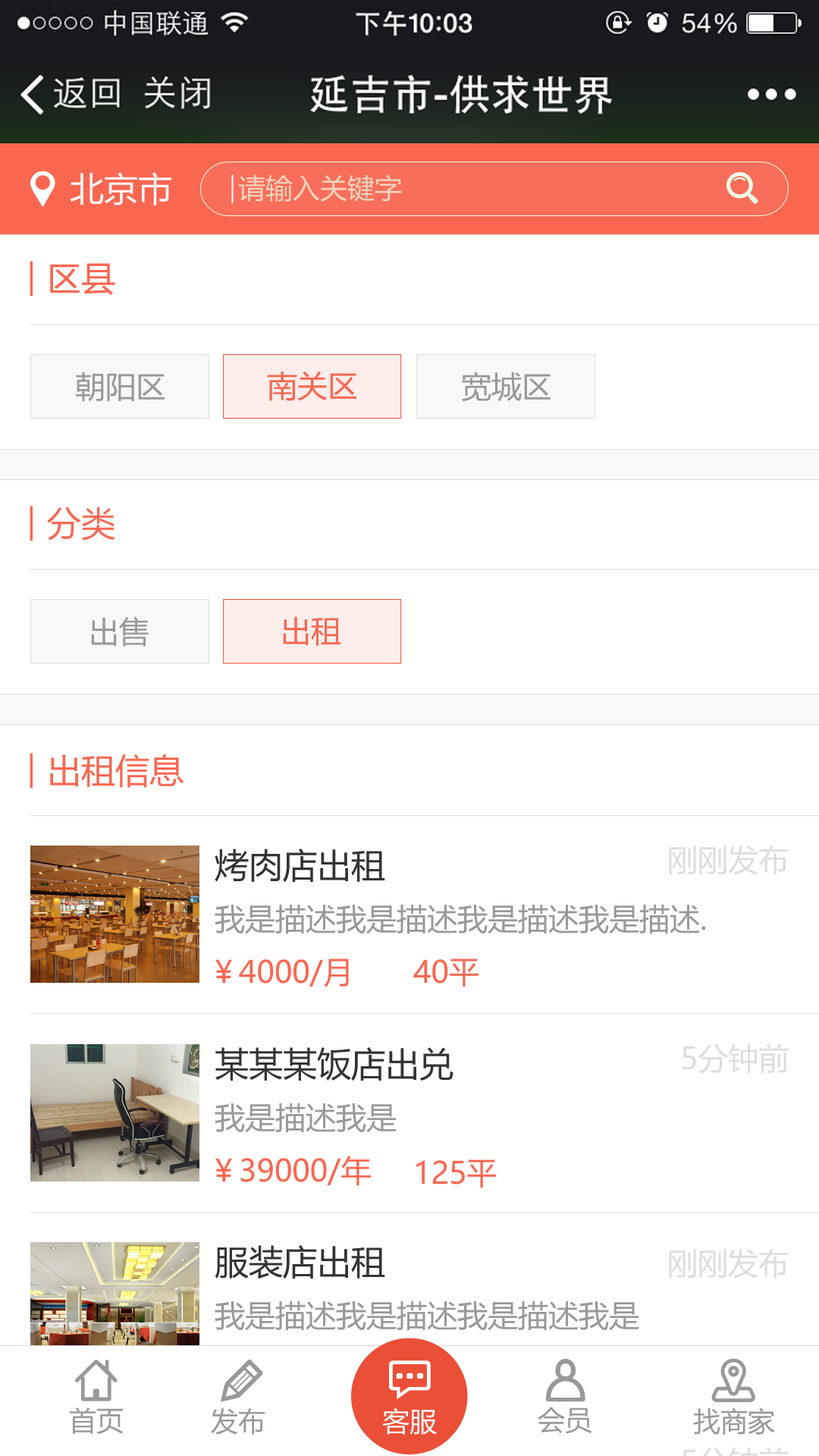
<style>
.page{position:relative;width:819px;height:1456px;background:#ffffff}
.page>*{position:absolute;margin:0}
.t1{font:34.1px "MicrosoftYaHei";color:#ffffff;text-transform:uppercase}
.t2{font:27.3px "MicrosoftYaHei";color:#f1d4bd;text-transform:uppercase}
.t3{font:34.1px "MicrosoftYaHei";color:#f96751}
.t4{font:30.3px "MicrosoftYaHei";color:#999999}
.t5{font:30.3px "MicrosoftYaHei";color:#f96751}
.t6{font:30.3px "MicrosoftYaHei";color:#dddddd}
.t7{font:34.1px "MicrosoftYaHei";color:#333333}
.t8{font:27.3px "MicrosoftYaHei";color:#999999}
.t9{font:27.3px "MicrosoftYaHei";color:#ffffff}
</style>
<div class="page">
<p class="t1" style="left:70px;top:172px;width:101px;height:34px">北京市</p>
<p class="t2" style="left:238px;top:174px;width:164px;height:28px">请输入关键字</p>
<p class="t3" style="left:50px;top:263px;width:65px;height:32px">区县</p>
<p class="t4" style="left:76px;top:372px;width:89px;height:30px">朝阳区</p>
<p class="t5" style="left:268px;top:371px;width:88px;height:30px">南关区</p>
<p class="t4" style="left:462px;top:372px;width:89px;height:30px">宽城区</p>
<p class="t3" style="left:47px;top:507px;width:68px;height:34px">分类</p>
<p class="t4" style="left:91px;top:617px;width:58px;height:30px">出售</p>
<p class="t5" style="left:283px;top:617px;width:58px;height:29px">出租</p>
<p class="t3" style="left:50px;top:754px;width:134px;height:34px">出租信息</p>
<p class="t6" style="left:669px;top:845px;width:120px;height:30px">刚刚发布</p>
<p class="t7" style="left:215px;top:849px;width:170px;height:33px">烤肉店出租</p>
<p class="t4" style="left:215px;top:904px;width:491px;height:30px">我是描述我是描述我是描述我是描述.</p>
<p class="t5" style="left:215px;top:959px;width:134px;height:28px">￥4000/月</p>
<p class="t5" style="left:413px;top:959px;width:66px;height:28px">40平</p>
<p class="t7" style="left:215px;top:1047px;width:238px;height:34px">某某某饭店出兑</p>
<p class="t6" style="left:682px;top:1043px;width:107px;height:31px">5分钟前</p>
<p class="t4" style="left:215px;top:1103px;width:182px;height:30px">我是描述我是</p>
<p class="t5" style="left:215px;top:1156px;width:156px;height:30px">￥39000/年</p>
<p class="t5" style="left:416px;top:1159px;width:81px;height:29px">125平</p>
<p class="t7" style="left:215px;top:1245px;width:170px;height:34px">服装店出租</p>
<p class="t6" style="left:669px;top:1248px;width:120px;height:31px">刚刚发布</p>
<p class="t4" style="left:215px;top:1301px;width:424px;height:30px">我是描述我是描述我是描述我是</p>
<p class="t8" style="left:70px;top:1407px;width:53px;height:27px">首页</p>
<p class="t8" style="left:211px;top:1407px;width:54px;height:28px">发布</p>
<p class="t9" style="left:382px;top:1407px;width:55px;height:28px">客服</p>
<p class="t8" style="left:538px;top:1407px;width:54px;height:27px">会员</p>
<p class="t8" style="left:693px;top:1407px;width:82px;height:28px">找商家</p>
</div>
